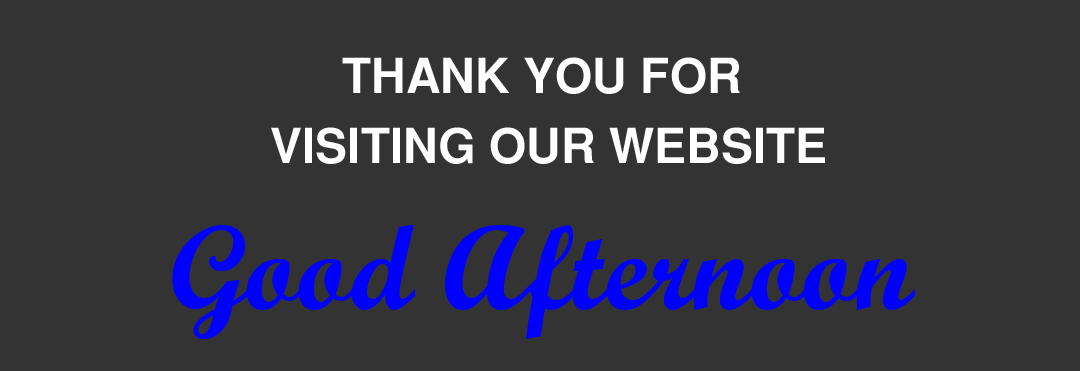
<style>
.page{position:relative;width:1080px;height:371px;background:#333333}
.page>*{position:absolute;margin:0}
.t1{font:48px/150px "SansSerifBold";color:#ffffff}
.t2{font:120px "ScriptMTBold";color:#0000ff}
</style>
<div class="page">
<p class="t1" style="left:271px;top:57px;width:554px;height:107px;text-align:center">THANK YOU FOR <br>VISITING OUR WEBSITE</p>
<p class="t2" style="left:172px;top:225px;width:743px;height:114px">Good Afternoon</p>
</div>
